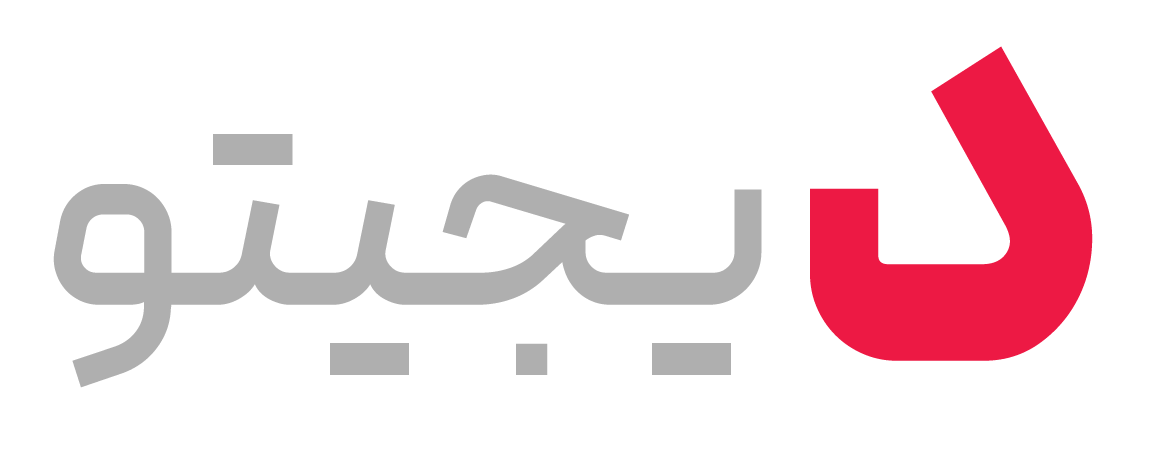
<style>
.page{position:relative;width:1151px;height:456px;background:#ffffff}
.page>*{position:absolute;margin:0}
.t1{font:566.7px "Peyda-Black";color:#ed1944}
.t2{font:325px "Peyda-Medium";color:#afafaf}
</style>
<div class="page">
<p class="t1" style="left:810px;top:46px;width:283px;height:315px">د</p>
<p class="t2" style="left:53px;top:134px;width:709px;height:254px">یجیتو</p>
</div>
